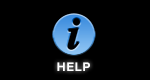
<style>
.page{position:relative;width:150px;height:80px;background:#000000}
.page>*{position:absolute;margin:0}
.t1{font:12px "AlteHaasGrotesk_Bold";letter-spacing:0.05em;color:#ffffff}
</style>
<div class="page">
<p class="t1" style="left:57px;top:62px;width:33px;height:9px">HELP</p>
</div>
